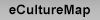
<style>
.page{position:relative;width:100px;height:20px}
.page>*{position:absolute;margin:0}
.t1{font:13.2px "Arial-BoldMT";color:#000000}
</style>
<div class="page">
<p class="t1" style="left:9px;top:4px;width:81px;height:13px">eCultureMap</p>
</div>
